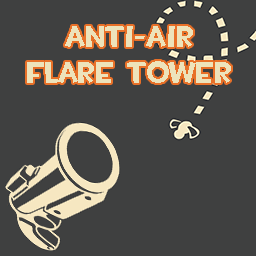
<style>
.page{position:relative;width:256px;height:256px;background:#3f4040}
.page>*{position:absolute;margin:0}
.t1{font:30px/36px "TF2Build";color:#ede3bb}
</style>
<div class="page">
<p class="t1" style="left:27px;top:26px;width:204px;height:57px;text-align:center">Anti-Air<br>Flare Tower</p>
</div>
